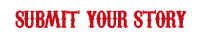
<style>
.page{position:relative;width:205px;height:38px;background:#ffffff}
.page>*{position:absolute;margin:0}
.t1{font:30px "CarnivaleeFreakshow";letter-spacing:-0.035em;color:#cc0814}
</style>
<div class="page">
<p class="t1" style="left:15px;top:9px;width:172px;height:19px">submit your story</p>
</div>
